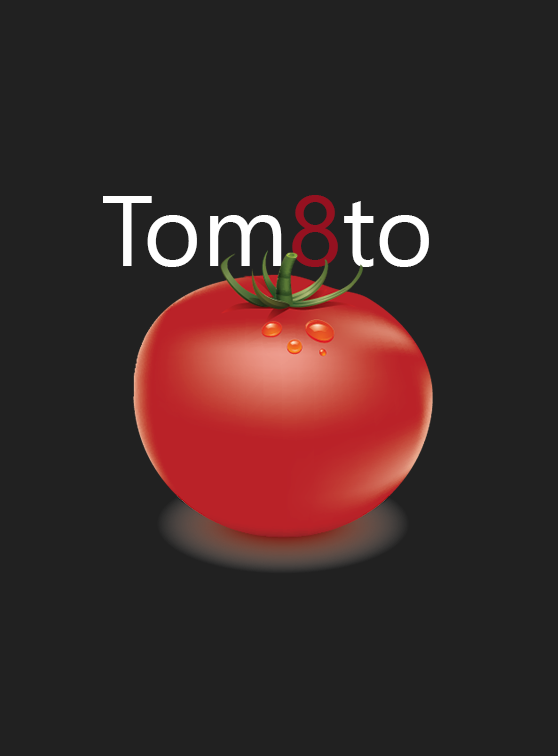
<style>
.page{position:relative;width:558px;height:756px;background:#212121}
.page>*{position:absolute;margin:0}
.t1{font:100px "SegoeUI";color:#ffffff}
.t2{font:100px "SegoeUI";color:#951120}
</style>
<div class="page">
<p class="t1" style="left:103px;top:195px;width:326px;height:72px">Tom<span class="t2">8</span>to</p>
</div>
